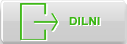
<style>
.page{position:relative;width:127px;height:44px}
.page>*{position:absolute;margin:0}
.t1{font:11.3px "Arial-BoldMT";color:#3bb714;text-transform:uppercase;scale:1.07 1}
</style>
<div class="page">
<p class="t1" style="left:69px;top:17px;width:31px;height:8px">Dilni</p>
</div>
